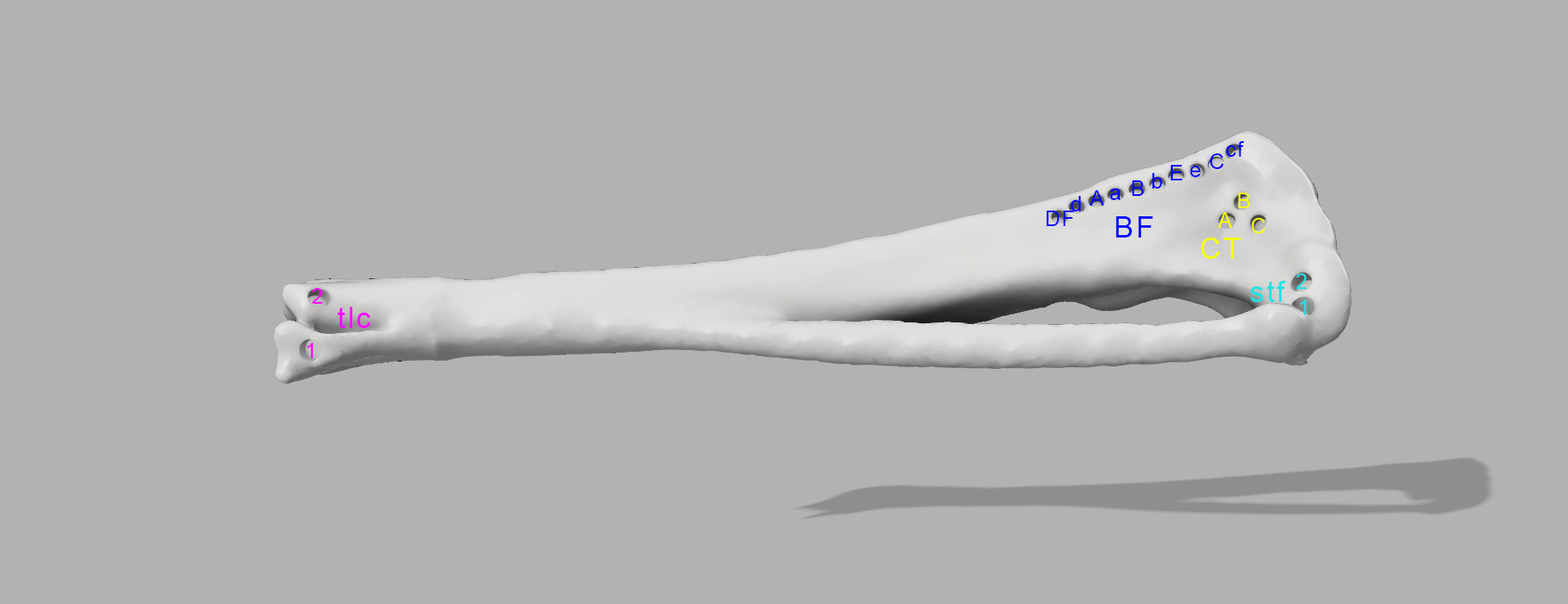
<style>
.page{position:relative;width:1568px;height:604px;background:#b2b2b2}
.page>*{position:absolute;margin:0}
.t1{font:21.2px "ArialMT";letter-spacing:0.06em;color:#0000ff}
.t2{font:21.2px "ArialMT";letter-spacing:0.06em;color:#f6ff00}
.t3{font:29.4px "ArialMT";letter-spacing:0.06em;color:#0000ff}
.t4{font:29.4px "ArialMT";letter-spacing:0.06em;color:#f6ff00}
.t5{font:29.4px "ArialMT";letter-spacing:0.06em;color:#1ce3e5}
.t6{font:21.2px "ArialMT";letter-spacing:0.06em;color:#1ce3e5}
.t7{font:21.2px "ArialMT";letter-spacing:0.06em;color:#ff00ff}
.t8{font:29.4px "ArialMT";letter-spacing:0.06em;color:#ff00ff}
</style>
<div class="page">
<p class="t1" style="left:1226px;top:141px;width:19px;height:16px">cf</p>
<p class="t1" style="left:1209px;top:154px;width:15px;height:15px">C</p>
<p class="t1" style="left:1152px;top:173px;width:10px;height:16px">b</p>
<p class="t1" style="left:1170px;top:165px;width:13px;height:15px">E</p>
<p class="t1" style="left:1190px;top:166px;width:10px;height:11px">e</p>
<p class="t1" style="left:1132px;top:180px;width:12px;height:16px">B</p>
<p class="t1" style="left:1071px;top:196px;width:10px;height:16px">d</p>
<p class="t1" style="left:1089px;top:190px;width:15px;height:16px">A</p>
<p class="t1" style="left:1110px;top:189px;width:10px;height:11px">a</p>
<p class="t2" style="left:1238px;top:193px;width:12px;height:15px">B</p>
<p class="t1" style="left:1046px;top:211px;width:28px;height:15px">DF</p>
<p class="t3" style="left:1116px;top:216px;width:37px;height:22px">BF</p>
<p class="t2" style="left:1218px;top:212px;width:14px;height:16px">A</p>
<p class="t2" style="left:1251px;top:218px;width:15px;height:16px">C</p>
<p class="t4" style="left:1200px;top:238px;width:41px;height:21px">CT</p>
<p class="t5" style="left:1250px;top:281px;width:36px;height:21px">stf</p>
<p class="t6" style="left:1296px;top:274px;width:11px;height:15px">2</p>
<p class="t7" style="left:312px;top:288px;width:11px;height:16px">2</p>
<p class="t6" style="left:1300px;top:300px;width:7px;height:15px">1</p>
<p class="t8" style="left:337px;top:307px;width:34px;height:21px">tlc</p>
<p class="t7" style="left:307px;top:343px;width:7px;height:16px">1</p>
</div>
